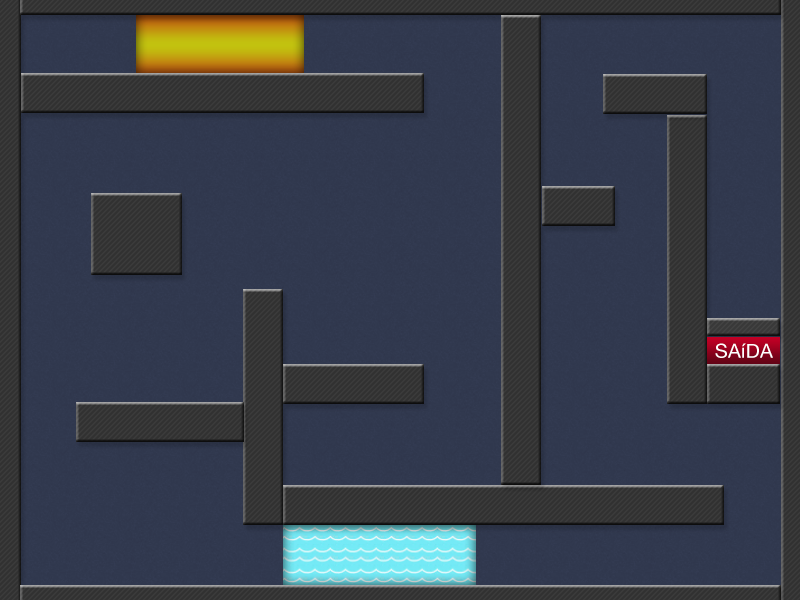
<style>
.page{position:relative;width:800px;height:600px;background:#31394f}
.page>*{position:absolute;margin:0}
.t1{font:19.4px "HelveticaNeue";letter-spacing:0.01em;color:#ffffff}
</style>
<div class="page">
<p class="t1" style="left:715px;top:343px;width:58px;height:15px">SAíDA</p>
</div>
